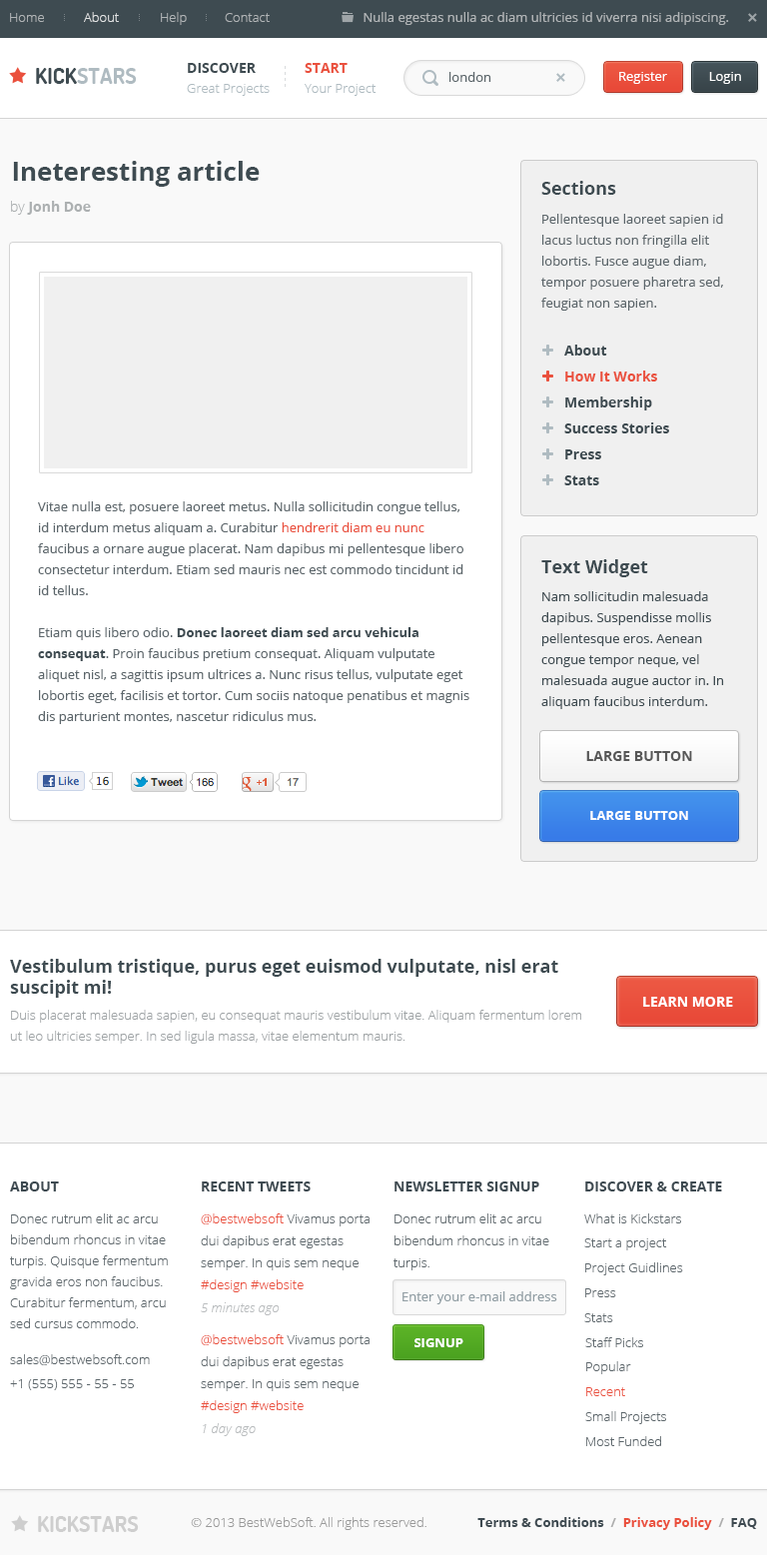
<style>
.page{position:relative;width:767px;height:1555px;background:#ffffff}
.page>*{position:absolute;margin:0}
.t1{font:13px "OpenSans-Light";color:#b0b4b6}
.t2{font:13px "OpenSans-Light";color:#e1e3e3}
.t3{font:13px "OpenSans";color:#b0b4b6}
.t4{font:14px "OpenSans-Bold";color:#3e4b51;text-transform:uppercase}
.t5{font:14px "OpenSans-Bold";color:#ea503d;text-transform:uppercase}
.t6{font:22px "Dosis-Bold";color:#afbbc1;text-transform:uppercase}
.t7{font:22px "Dosis-Bold";color:#3e4b51;text-transform:uppercase}
.t8{font:13px "OpenSans";color:#5c666b}
.t9{font:13px "OpenSans";color:#ffffff}
.t10{font:13px "OpenSans-Light";color:#afbbc1}
.t11{font:26px "OpenSans-Bold";color:#3e4b51}
.t12{font:18px "OpenSans-Bold";color:#3e4b51}
.t13{font:14px "OpenSans-Bold";color:#acb0b1}
.t14{font:14px "OpenSans-Light";color:#acb0b1}
.t15{font:13px/21px "OpenSans";color:#5c666b}
.t16{font:14px "OpenSans-Bold";color:#3e4b51}
.t17{font:14px "OpenSans-Bold";color:#ea503d}
.t18{font:13px/21px "OpenSans";color:#ea503d}
.t19{font:13px/21px "OpenSans-Bold";color:#3e4b51}
.t20{font:13px/21px "OpenSans";color:#3e4b51}
.t21{font:14px "OpenSans-Bold";color:#575757;text-transform:uppercase}
.t22{font:13px "OpenSans-Bold";color:#ffffff;text-transform:uppercase}
.t23{font:14px "OpenSans-Bold";color:#ffffff;text-transform:uppercase}
.t24{font:13px/21px "OpenSans-Light";color:#9da2a4}
.t25{font:14px "OpenSans-Bold";color:#3e4a51;text-transform:uppercase}
.t26{font:13px/21px "OpenSans-Light";color:#5c666b}
.t27{font:13px/22px "OpenSans-Light";color:#5c666b}
.t28{font:13px/22px "OpenSans-Light";color:#ea503d}
.t29{font:13px "OpenSans-Light";color:#5c666b}
.t30{font:13px "OpenSans";color:#909da3}
.t31{font:13px "OpenSansLight-Italic";color:#b9bcbe}
.t32{font:13px "OpenSans-Light";color:#ea503d}
.t33{font:22px "Dosis-Bold";color:#cecece;text-transform:uppercase}
.t34{font:13px "OpenSans-Light";color:#999999}
.t35{font:13px "OpenSans-Bold";color:#3e4a51}
.t36{font:13px "OpenSans-Bold";color:#aeaeae}
.t37{font:13px "OpenSans-Bold";color:#ea503d}
</style>
<div class="page">
<p class="t1" style="left:10px;top:13px;width:34px;height:9px">Home</p>
<p class="t2" style="left:84px;top:12px;width:35px;height:10px">About</p>
<p class="t1" style="left:161px;top:12px;width:26px;height:13px">Help</p>
<p class="t1" style="left:225px;top:13px;width:45px;height:9px">Contact</p>
<p class="t3" style="left:363px;top:12px;width:366px;height:13px">Nulla egestas nulla ac diam ultricies id viverra nisi adipiscing.</p>
<p class="t4" style="left:188px;top:63px;width:68px;height:10px">Discover</p>
<p class="t5" style="left:305px;top:63px;width:43px;height:10px">Start</p>
<p class="t6" style="left:36px;top:68px;width:101px;height:16px"><span class="t7">Kick</span>stars</p>
<p class="t8" style="left:449px;top:72px;width:42px;height:10px">london</p>
<p class="t9" style="left:619px;top:72px;width:48px;height:12px">Register</p>
<p class="t9" style="left:709px;top:72px;width:32px;height:12px">Login</p>
<p class="t10" style="left:187px;top:84px;width:83px;height:12px">Great Projects</p>
<p class="t10" style="left:305px;top:84px;width:71px;height:12px">Your Project</p>
<p class="t11" style="left:13px;top:161px;width:247px;height:26px">Ineteresting article</p>
<p class="t12" style="left:541px;top:181px;width:75px;height:14px">Sections</p>
<p class="t13" style="left:11px;top:201px;width:80px;height:14px"><span class="t14">by </span>Jonh Doe</p>
<p class="t15" style="left:541px;top:214px;width:182px;height:97px">Pellentesque laoreet sapien id lacus luctus non fringilla elit lobortis. Fusce augue diam, tempor posuere pharetra sed, feugiat non sapien.</p>
<p class="t16" style="left:564px;top:345px;width:43px;height:11px">About</p>
<p class="t17" style="left:565px;top:370px;width:92px;height:11px">How It Works</p>
<p class="t16" style="left:565px;top:396px;width:87px;height:14px">Membership</p>
<p class="t16" style="left:564px;top:422px;width:105px;height:11px">Success Stories</p>
<p class="t16" style="left:565px;top:449px;width:36px;height:10px">Press</p>
<p class="t16" style="left:564px;top:475px;width:35px;height:10px">Stats</p>
<p class="t15" style="left:38px;top:501px;width:431px;height:223px">Vitae nulla est, posuere laoreet metus. Nulla sollicitudin congue tellus, id interdum metus aliquam a. Curabitur <span class="t18">hendrerit diam eu nunc</span> faucibus a ornare augue placerat. Nam dapibus mi pellentesque libero consectetur interdum. Etiam sed mauris nec est commodo tincidunt id id tellus.<br><br>Etiam quis libero odio. <span class="t19">Donec laoreet diam sed arcu vehicula consequat</span>. Proin faucibus pretium consequat. Aliquam vulputate aliquet nisl, a sagittis ipsum ultrices a. Nunc risus tellus, vulputate eget lobortis eget, facilisis et tortor. Cum sociis natoque penatibus et magnis dis parturient montes, nascetur ridiculus mus.</p>
<p class="t12" style="left:541px;top:559px;width:107px;height:18px">Text Widget</p>
<p class="t20" style="left:541px;top:591px;width:183px;height:118px">Nam sollicitudin malesuada dapibus. Suspendisse mollis pellentesque eros. Aenean congue tempor neque, vel malesuada augue auctor in. In aliquam faucibus interdum.</p>
<p class="t21" style="left:586px;top:751px;width:106px;height:10px">Large button</p>
<p class="t22" style="left:590px;top:811px;width:98px;height:9px">Large button</p>
<p class="t12" style="left:10px;top:959px;width:548px;height:39px">Vestibulum tristique, purus eget euismod vulputate, nisl erat suscipit mi!</p>
<p class="t23" style="left:643px;top:997px;width:90px;height:10px">Learn More</p>
<p class="t24" style="left:10px;top:1010px;width:571px;height:34px">Duis placerat malesuada sapien, eu consequat mauris vestibulum vitae. Aliquam fermentum lorem ut leo ultricies semper. In sed ligula massa, vitae elementum mauris.</p>
<p class="t25" style="left:10px;top:1181px;width:49px;height:10px">About</p>
<p class="t25" style="left:202px;top:1181px;width:109px;height:10px">Recent Tweets</p>
<p class="t25" style="left:394px;top:1181px;width:145px;height:10px">Newsletter Signup</p>
<p class="t25" style="left:585px;top:1181px;width:137px;height:10px">Discover &amp; Create</p>
<p class="t26" style="left:10px;top:1213px;width:158px;height:115px">Donec rutrum elit ac arcu bibendum rhoncus in vitae turpis. Quisque fermentum gravida eros non faucibus. Curabitur fermentum, arcu sed cursus commodo.</p>
<p class="t27" style="left:201px;top:1213px;width:168px;height:79px"><span class="t28">@bestwebsoft</span> Vivamus porta dui dapibus erat egestas semper. In quis sem neque <span class="t28">#design #website</span></p>
<p class="t27" style="left:393px;top:1213px;width:156px;height:57px">Donec rutrum elit ac arcu bibendum rhoncus in vitae turpis.</p>
<p class="t29" style="left:584px;top:1213px;width:97px;height:10px">What is Kickstars</p>
<p class="t29" style="left:584px;top:1238px;width:83px;height:12px">Start a project</p>
<p class="t29" style="left:585px;top:1262px;width:98px;height:13px">Project Guidlines</p>
<p class="t29" style="left:585px;top:1288px;width:31px;height:9px">Press</p>
<p class="t30" style="left:402px;top:1291px;width:155px;height:13px">Enter your e-mail address</p>
<p class="t31" style="left:201px;top:1302px;width:79px;height:13px">5 minutes ago</p>
<p class="t29" style="left:584px;top:1313px;width:29px;height:9px">Stats</p>
<p class="t27" style="left:201px;top:1334px;width:168px;height:79px"><span class="t28">@bestwebsoft</span> Vivamus porta dui dapibus erat egestas semper. In quis sem neque <span class="t28">#design #website</span></p>
<p class="t29" style="left:585px;top:1337px;width:58px;height:10px">Staff Picks</p>
<p class="t22" style="left:414px;top:1338px;width:49px;height:9px">Signup</p>
<p class="t29" style="left:10px;top:1354px;width:140px;height:11px">sales@bestwebsoft.com</p>
<p class="t29" style="left:586px;top:1361px;width:45px;height:13px">Popular</p>
<p class="t29" style="left:10px;top:1379px;width:124px;height:11px">+1 (555) 555 - 55 - 55</p>
<p class="t32" style="left:586px;top:1387px;width:39px;height:9px">Recent</p>
<p class="t29" style="left:585px;top:1411px;width:81px;height:13px">Small Projects</p>
<p class="t31" style="left:203px;top:1423px;width:53px;height:13px">1 day ago</p>
<p class="t29" style="left:586px;top:1436px;width:75px;height:10px">Most Funded</p>
<p class="t33" style="left:38px;top:1516px;width:101px;height:16px">Kickstars</p>
<p class="t34" style="left:191px;top:1517px;width:235px;height:13px">© 2013 BestWebSoft. All rights reserved.</p>
<p class="t35" style="left:477px;top:1517px;width:280px;height:13px">Terms &amp; Conditions <span class="t36"> /  </span><span class="t37">Privacy Policy  </span><span class="t36">/</span>  FAQ</p>
</div>
